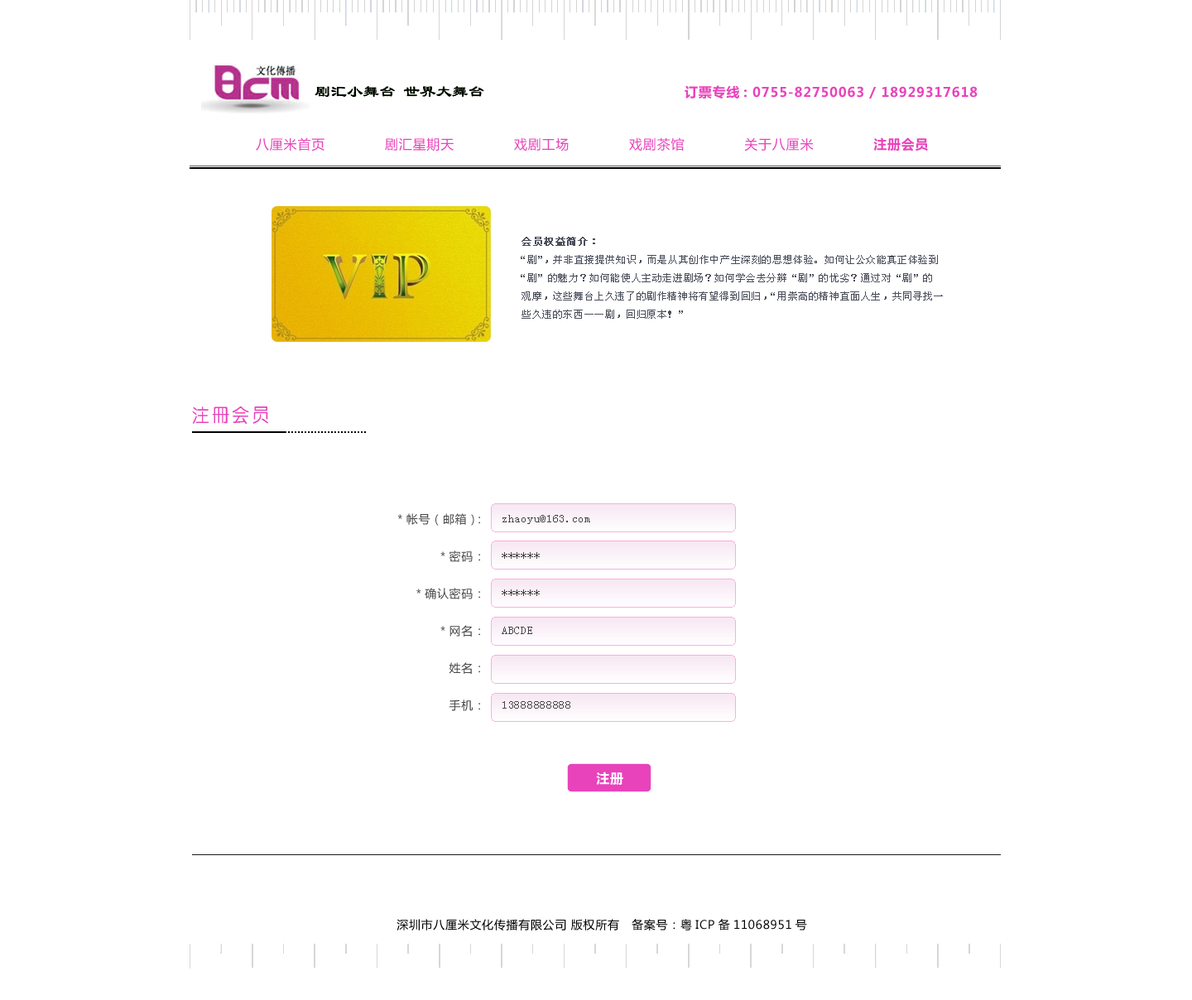
<style>
.page{position:relative;width:1192px;height:1000px;background:#ffffff}
.page>*{position:absolute;margin:0}
.t1{font:13.2px "MicrosoftYaHei";letter-spacing:0.05em;color:#e843bb}
.t2{font:9.9px/18.2px "SimSun";letter-spacing:0.05em;color:#4b4e5b}
.t3{font:9.9px/18.2px "SimSun";letter-spacing:0.05em;color:#4b4e5b;font-weight:bold}
.t4{font:19px "ÖÐÔ²Ìå-Regular";letter-spacing:0.05em;color:#e843bb}
.t5{font:11.6px/37.3px "MicrosoftYaHei";letter-spacing:0.05em;color:#484848}
.t6{font:11.6px/37.3px "SimSun";letter-spacing:0.05em;color:#494646}
.t7{font:13.2px "MicrosoftYaHei";letter-spacing:0.05em;color:#ffffff}
.t8{font:11.6px "MicrosoftYaHei";letter-spacing:0.05em;color:#000000}
</style>
<div class="page">
<p class="t1" style="left:685px;top:85px;width:293px;height:14px">订票专线: 0755-82750063 / 18929317618</p>
<p class="t1" style="left:256px;top:137px;width:672px;height:15px">八厘米首页             剧汇星期天             戏剧工场             戏剧茶馆             关于八厘米             注册会员</p>
<p class="t2" style="left:521px;top:237px;width:422px;height:82px"><span class="t3">会员权益简介：<br></span>“剧”，并非直接提供知识，而是从其创作中产生深刻的思想体验。如何让公众能真正体验到<br>“剧”的魅力？如何能使人主动走进剧场？如何学会去分辨“剧”的优劣？通过对“剧”的<br>观摩，这些舞台上久违了的剧作精神将有望得到回归，“用崇高的精神直面人生，共同寻找一<br>些久违的东西——剧，回归原本！”</p>
<p class="t4" style="left:192px;top:407px;width:77px;height:17px">注册会员</p>
<p class="t5" style="left:397px;top:513px;width:83px;height:198px;text-align:right">*帐号（邮箱）：<br>*密码：<br>*确认密码：<br>*网名：<br>姓名：<br>手机：</p>
<p class="t6" style="left:502px;top:515px;width:88px;height:194px">zhaoyu@163.com<br>******<br>******<br>ABCDE<br><br>13888888888</p>
<p class="t7" style="left:596px;top:772px;width:27px;height:14px">注册</p>
<p class="t8" style="left:397px;top:919px;width:410px;height:12px">深圳市八厘米文化传播有限公司 版权所有   备案号：粤ICP备11068951号</p>
</div>
